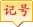
<style>
.page{position:relative;width:33px;height:27px}
.page>*{position:absolute;margin:0}
.t1{font:13.3px "KaiTi_GB2312";color:#cc3333;font-weight:bold}
</style>
<div class="page">
<p class="t1" style="left:3px;top:4px;width:27px;height:13px">记号</p>
</div>
